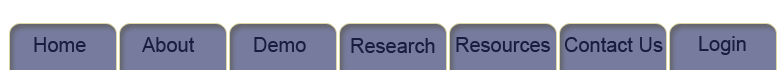
<style>
.page{position:relative;width:780px;height:70px;background:#777c9e}
.page>*{position:absolute;margin:0}
.t1{font:20px "ArialMT";color:#191e40}
</style>
<div class="page">
<p class="t1" style="left:34px;top:37px;width:52px;height:15px">Home</p>
<p class="t1" style="left:142px;top:37px;width:53px;height:15px">About</p>
<p class="t1" style="left:254px;top:37px;width:52px;height:15px">Demo</p>
<p class="t1" style="left:351px;top:38px;width:84px;height:15px">Research</p>
<p class="t1" style="left:456px;top:37px;width:94px;height:15px">Resources</p>
<p class="t1" style="left:564px;top:37px;width:99px;height:15px">Contact Us</p>
<p class="t1" style="left:699px;top:36px;width:47px;height:19px">Login</p>
</div>
